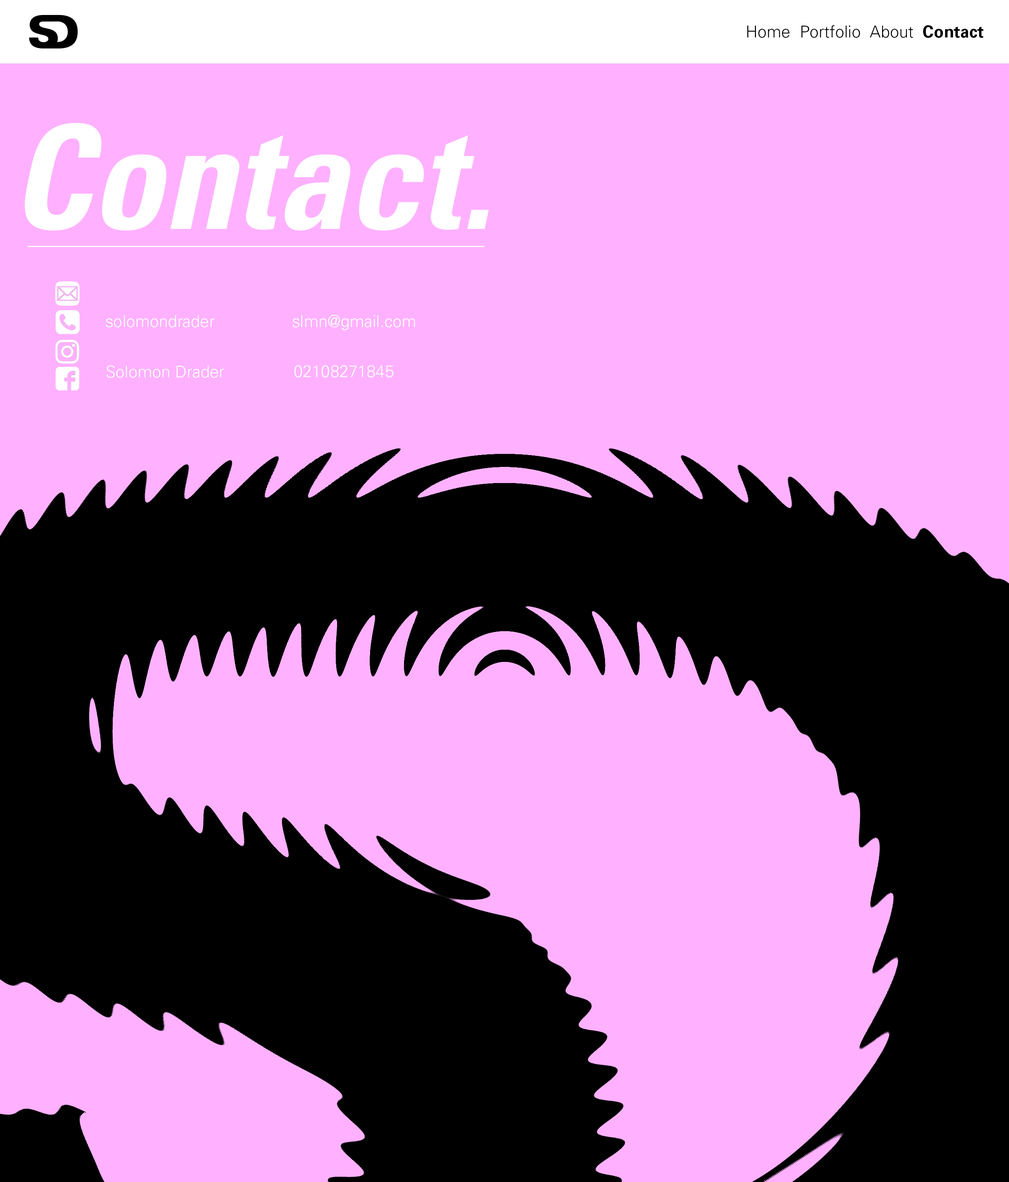
<style>
.page{position:relative;width:1009px;height:1182px;background:#ffb1ff}
.page>*{position:absolute;margin:0}
.t1{font:16.4px "Univers-Light";color:#000000}
.t2{font:16.4px "Univers-Bold";color:#000000}
.t3{font:144.5px "Univers-CondensedBoldOblique";color:#ffffff}
.t4{font:16.4px "Univers-Light";color:#ffffff}
</style>
<div class="page">
<p class="t1" style="left:747px;top:25px;width:236px;height:13px">Home  Portfolio  About  <span class="t2">Contact</span></p>
<p class="t3" style="left:24px;top:123px;width:465px;height:108px">Contact.</p>
<p class="t4" style="left:106px;top:315px;width:109px;height:12px">solomondrader</p>
<p class="t4" style="left:292px;top:315px;width:123px;height:15px">slmn@gmail.com</p>
<p class="t4" style="left:106px;top:365px;width:118px;height:13px">Solomon Drader</p>
<p class="t4" style="left:294px;top:365px;width:99px;height:12px">02108271845</p>
</div>
